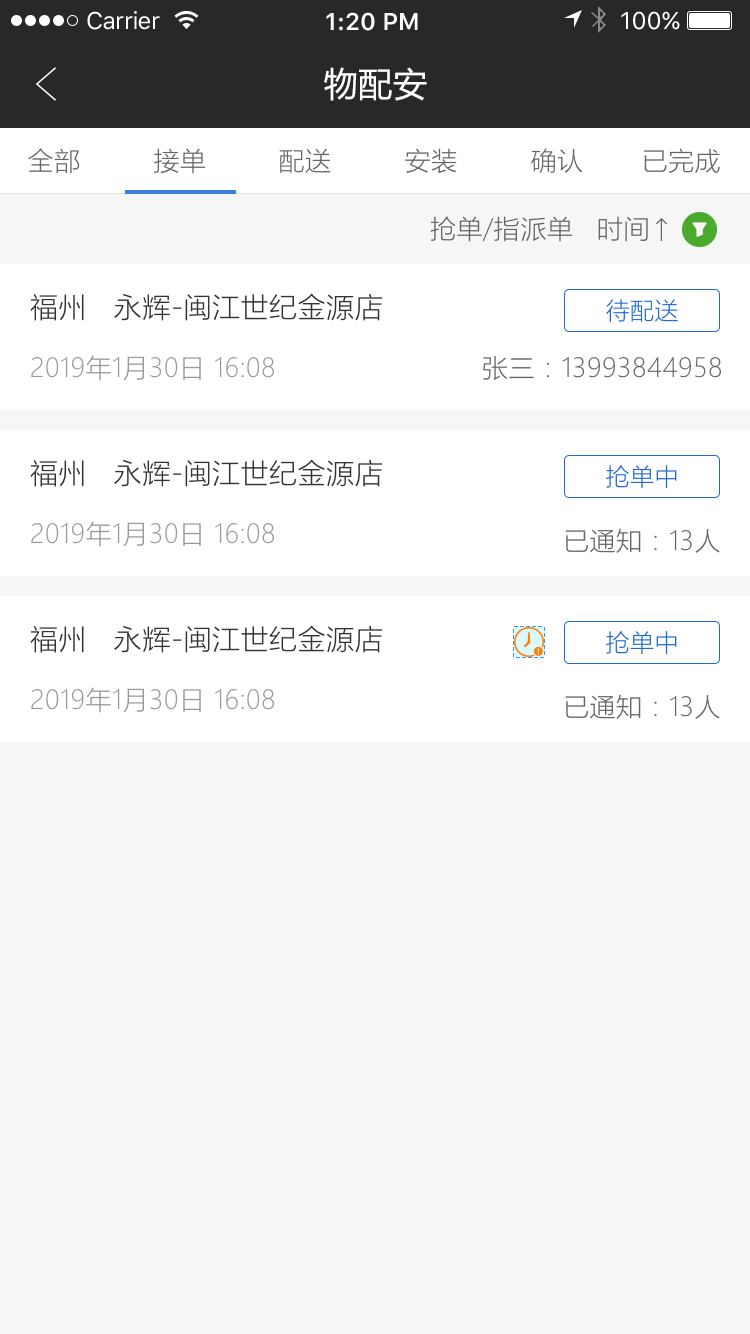
<style>
.page{position:relative;width:750px;height:1334px;background:#f6f6f6}
.page>*{position:absolute;margin:0}
.t1{font:24px "SFUIText-Regular";letter-spacing:-0.025em;color:#ffffff}
.t2{font:24px "SFUIText-Semibold";color:#ffffff}
.t3{font:24px "SFUIText-Regular";color:#ffffff}
.t4{font:34px "MicrosoftYaHei";letter-spacing:0.02em;color:#ffffff}
.t5{font:26px "MicrosoftYaHeiLight";letter-spacing:0.02em;color:#666666}
.t6{font:28px "MicrosoftYaHeiLight";letter-spacing:0.02em;color:#333333}
.t7{font:24px "MicrosoftYaHeiLight";letter-spacing:0.02em;color:#2269d4}
.t8{font:26px "MicrosoftYaHeiLight";letter-spacing:0.02em;color:#999999}
</style>
<div class="page">
<p class="t1" style="left:87px;top:11px;width:73px;height:19px">Carrier</p>
<p class="t2" style="left:326px;top:12px;width:92px;height:19px">1:20 PM</p>
<p class="t3" style="left:621px;top:11px;width:59px;height:19px">100%</p>
<p class="t4" style="left:324px;top:67px;width:103px;height:34px">物配安</p>
<p class="t5" style="left:28px;top:148px;width:52px;height:26px">全部</p>
<p class="t5" style="left:154px;top:148px;width:52px;height:26px">接单</p>
<p class="t5" style="left:279px;top:148px;width:52px;height:25px">配送</p>
<p class="t5" style="left:405px;top:148px;width:52px;height:26px">安装</p>
<p class="t5" style="left:531px;top:148px;width:52px;height:25px">确认</p>
<p class="t5" style="left:644px;top:148px;width:76px;height:25px">已完成</p>
<p class="t5" style="left:430px;top:216px;width:143px;height:26px">抢单/指派单</p>
<p class="t5" style="left:598px;top:216px;width:50px;height:26px">时间</p>
<p class="t6" style="left:30px;top:293px;width:353px;height:28px">福州   永辉-闽江世纪金源店</p>
<p class="t7" style="left:606px;top:299px;width:72px;height:23px">待配送</p>
<p class="t8" style="left:31px;top:355px;width:243px;height:26px">2019年1月30日 16:08</p>
<p class="t5" style="left:483px;top:356px;width:238px;height:24px">张三：13993844958</p>
<p class="t6" style="left:30px;top:459px;width:353px;height:28px">福州   永辉-闽江世纪金源店</p>
<p class="t7" style="left:606px;top:465px;width:71px;height:24px">抢单中</p>
<p class="t8" style="left:31px;top:521px;width:243px;height:26px">2019年1月30日 16:08</p>
<p class="t5" style="left:565px;top:528px;width:155px;height:25px">已通知：13人</p>
<p class="t6" style="left:30px;top:625px;width:353px;height:28px">福州   永辉-闽江世纪金源店</p>
<p class="t7" style="left:606px;top:631px;width:71px;height:24px">抢单中</p>
<p class="t8" style="left:31px;top:687px;width:243px;height:26px">2019年1月30日 16:08</p>
<p class="t5" style="left:565px;top:694px;width:155px;height:25px">已通知：13人</p>
</div>
